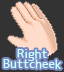
<style>
.page{position:relative;width:64px;height:72px;background:#333333}
.page>*{position:absolute;margin:0}
.t1{font:12px/10px "JK-Gothic-M";color:#c9ffff}
</style>
<div class="page">
<p class="t1" style="left:3px;top:49px;width:59px;height:20px;text-align:center">Right<br>Buttcheek</p>
</div>
